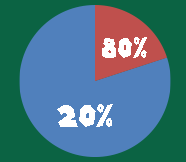
<style>
.page{position:relative;width:186px;height:162px;background:#5080bc}
.page>*{position:absolute;margin:0}
.t1{font:27.2px "SuperMarioGalaxy";color:#ffffff;scale:0.92 1}
.t2{font:30.2px "SuperMarioGalaxy";color:#ffffff}
</style>
<div class="page">
<p class="t1" style="left:102px;top:37px;width:45px;height:21px">80%</p>
<p class="t2" style="left:57px;top:104px;width:56px;height:23px">20%</p>
</div>
